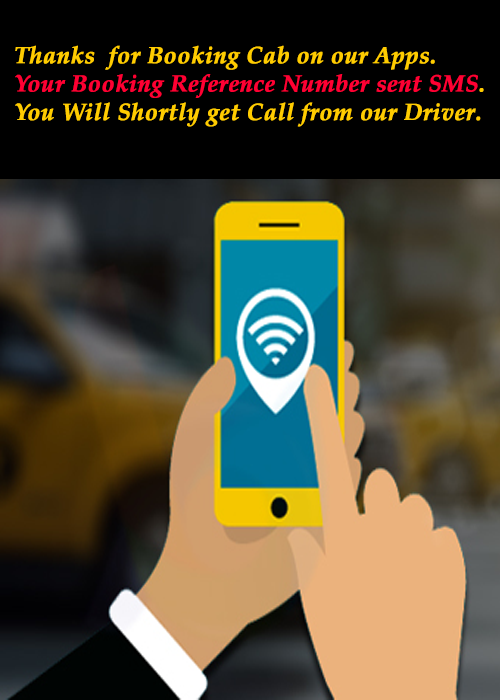
<style>
.page{position:relative;width:500px;height:700px;background:#000000}
.page>*{position:absolute;margin:0}
.t1{font:23.6px "PalatinoLinotype-BoldItalic";color:#ffcc00;font-weight:bold}
.t2{font:23.6px "PalatinoLinotype-BoldItalic";color:#ff0033;font-weight:bold}
</style>
<div class="page">
<p class="t1" style="left:15px;top:45px;width:469px;height:82px">Thanks  for Booking Cab on our Apps. <br><span class="t2">Your Booking Reference Number sent SMS</span>.<br>You Will Shortly get Call from our Driver.</p>
</div>
